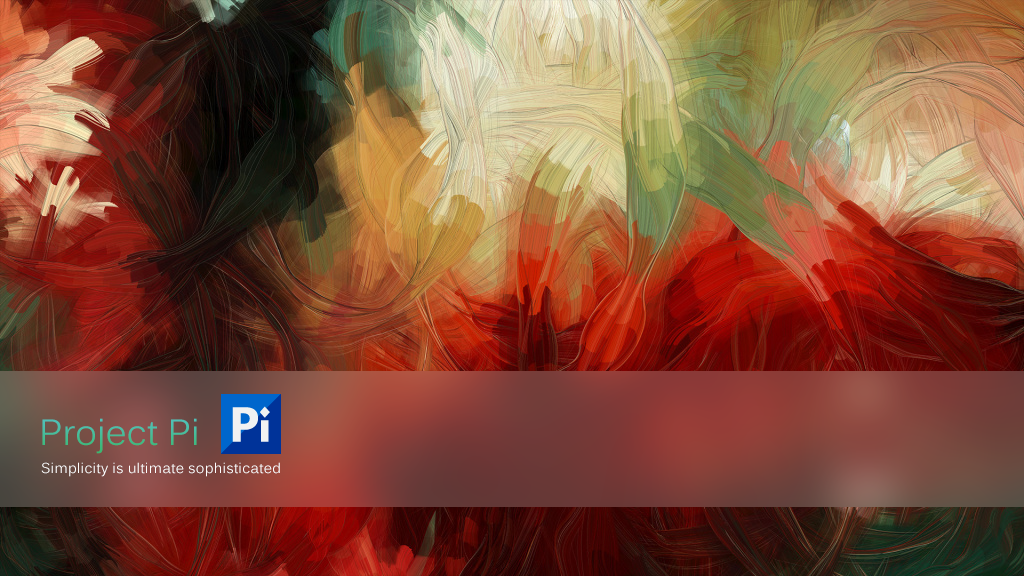
<style>
.page{position:relative;width:1024px;height:576px}
.page>*{position:absolute;margin:0}
.t1{font:36px "Kalinga"}
.t2{font:14px "Kalinga";letter-spacing:0.025em;color:#fefefe}
</style>
<div class="page">
<p class="t1" style="left:42px;top:418px;width:155px;height:36px">Project Pi</p>
<p class="t2" style="left:41px;top:462px;width:239px;height:15px">Simplicity is ultimate sophisticated</p>
</div>
